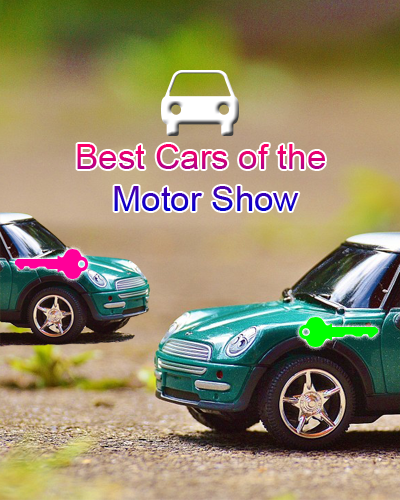
<style>
.page{position:relative;width:400px;height:500px}
.page>*{position:absolute;margin:0}
.t1{font:35px "ArialMT"}
</style>
<div class="page">
<p class="t1" style="left:77px;top:144px;width:248px;height:67px;text-align:center">Best Cars of the <br>Motor Show</p>
</div>
